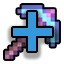
<style>
.page{position:relative;width:64px;height:64px;background:#ffffff}
.page>*{position:absolute;margin:0}
.t1{font:62.1px "Minecraftia-Regular";color:#3498db}
</style>
<div class="page">
<p class="t1" style="left:13px;top:12px;width:39px;height:39px">+</p>
</div>
